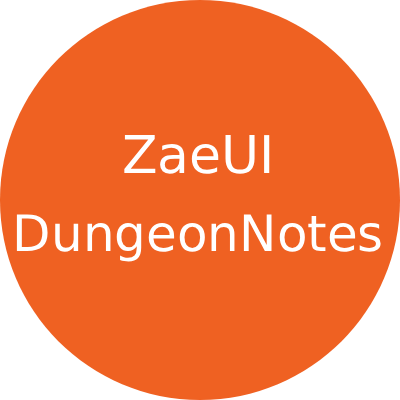
<style>
.page{position:relative;width:400px;height:400px;background:#ef6122}
.page>*{position:absolute;margin:0}
.t1{font:50px "DejaVuSans";color:#ffffff}
.t2{font:52px "DejaVuSans";color:#ffffff}
</style>
<div class="page">
<p class="t1" style="left:16px;top:135px;width:365px;height:127px;text-align:center"><span class="t2">ZaeUI<br><br></span>DungeonNotes</p>
</div>
